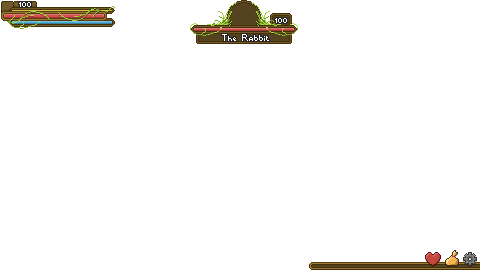
<style>
.page{position:relative;width:480px;height:270px;background:#ffffff}
.page>*{position:absolute;margin:0}
.t1{font:8px "E.L.F.";color:#ffffff}
.t2{font:15px "Indicity";color:#ffffff}
</style>
<div class="page">
<p class="t1" style="left:19px;top:2px;width:12px;height:5px">100</p>
<p class="t1" style="left:275px;top:18px;width:12px;height:5px">100</p>
<p class="t2" style="left:222px;top:34px;width:47px;height:7px">The Rabbit</p>
</div>
